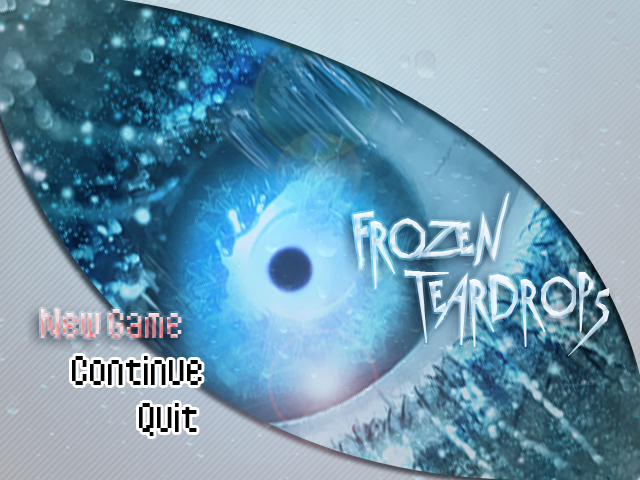
<style>
.page{position:relative;width:640px;height:480px}
.page>*{position:absolute;margin:0}
.t1{font:36px "MDThaitypeA"}
.t2{font:36px "MDThaitypeA";color:#000000}
</style>
<div class="page">
<p class="t1" style="left:41px;top:309px;width:141px;height:29px">New Game</p>
<p class="t2" style="left:72px;top:356px;width:130px;height:29px">Continue</p>
<p class="t2" style="left:139px;top:403px;width:58px;height:33px">Quit</p>
</div>
